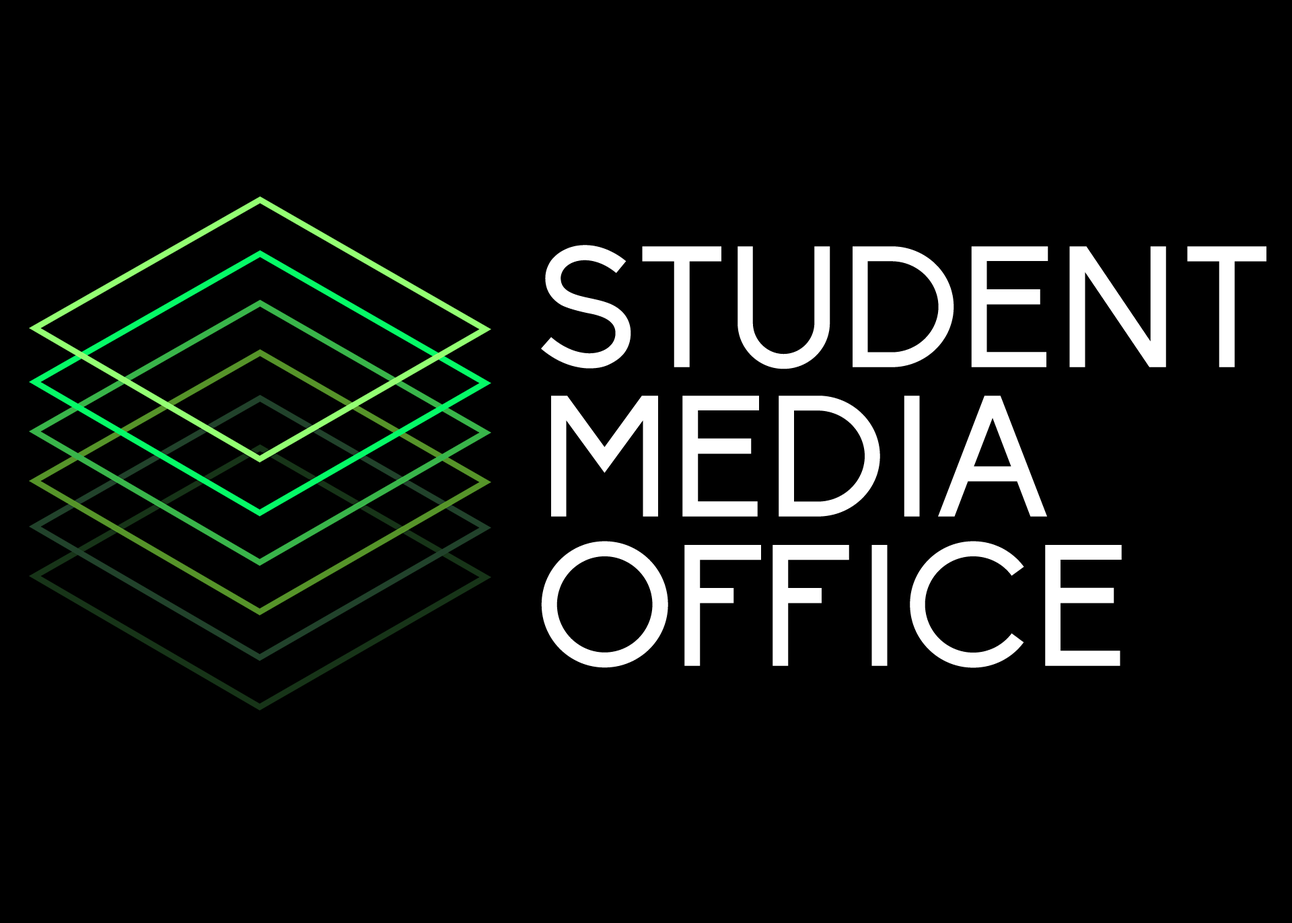
<style>
.page{position:relative;width:1292px;height:923px;background:#000000}
.page>*{position:absolute;margin:0}
.t1{font:169.5px/149.3px "Biko";color:#ffffff;text-transform:uppercase}
</style>
<div class="page">
<p class="t1" style="left:541px;top:245px;width:725px;height:423px">Student<br>media<br>office</p>
</div>
